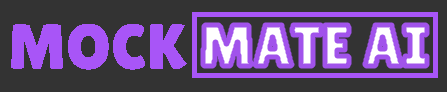
<style>
.page{position:relative;width:447px;height:92px;background:#333333}
.page>*{position:absolute;margin:0}
.t1{font:64px "LilitaOne";color:#a855f7}
.t2{font:58.6px "LilitaOne";letter-spacing:0.015em}
</style>
<div class="page">
<p class="t1" style="left:11px;top:24px;width:176px;height:46px">MOCK</p>
<p class="t2" style="left:203px;top:25px;width:224px;height:41px">MATE AI</p>
</div>
